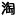
<style>
.page{position:relative;width:16px;height:16px;background:#ffffff}
.page>*{position:absolute;margin:0}
.t1{font:15px "YuppyTC-Regular";color:#000000;font-weight:bold}
</style>
<div class="page">
<p class="t1" style="left:1px;top:1px;width:14px;height:14px">淘</p>
</div>
